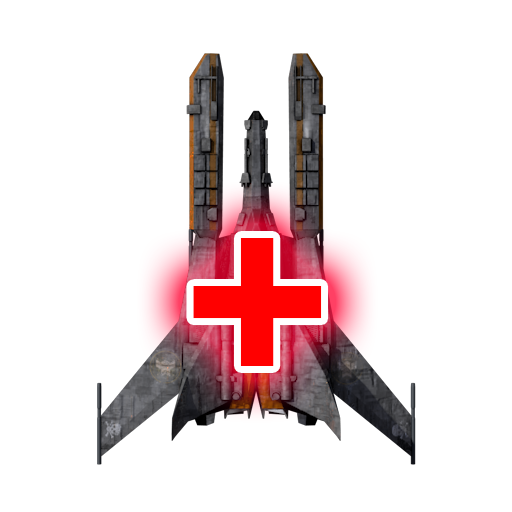
<style>
.page{position:relative;width:512px;height:512px;background:#ffffff}
.page>*{position:absolute;margin:0}
.t1{font:271px "Impact";color:#ff0000}
</style>
<div class="page">
<p class="t1" style="left:193px;top:238px;width:129px;height:128px">+</p>
</div>
